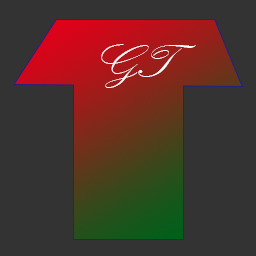
<style>
.page{position:relative;width:256px;height:256px;background:#333333}
.page>*{position:absolute;margin:0}
.t1{font:48px "KunstlerScript";color:#f9fbfc}
</style>
<div class="page">
<p class="t1" style="left:101px;top:44px;width:95px;height:44px">GT</p>
</div>
